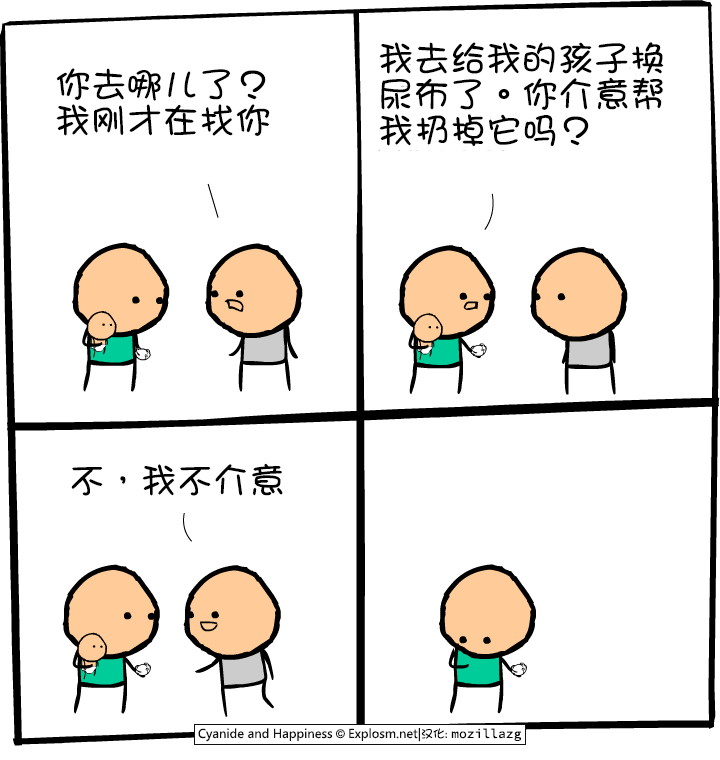
<style>
.page{position:relative;width:720px;height:760px;background:#ffffff}
.page>*{position:absolute;margin:0}
.t1{font:36px/36px "DFGirl";color:#000000}
.t2{font:36px "DFGirl";color:#000000}
</style>
<div class="page">
<p class="t1" style="left:379px;top:42px;width:285px;height:105px">我去给我的孩子换<br>尿布了。你介意帮<br>我扔掉它吗？</p>
<p class="t1" style="left:56px;top:68px;width:214px;height:68px">你去哪儿了？<br>我刚才在找你</p>
<p class="t2" style="left:71px;top:463px;width:212px;height:33px">不，我不介意</p>
</div>
